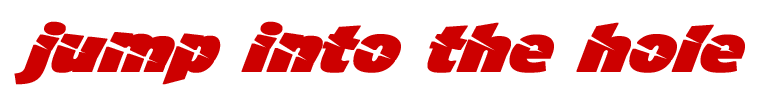
<style>
.page{position:relative;width:762px;height:110px;background:#ffffff}
.page>*{position:absolute;margin:0}
.t1{font:72px "A-Cuchillada";color:#cd0000;font-weight:bold;font-style:italic}
</style>
<div class="page">
<p class="t1" style="left:14px;top:21px;width:731px;height:64px">jump into the hole</p>
</div>
